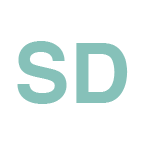
<style>
.page{position:relative;width:144px;height:144px;background:#ffffff}
.page>*{position:absolute;margin:0}
.t1{font:83.3px "Helvetica-Bold";color:#86c1b9}
</style>
<div class="page">
<p class="t1" style="left:17px;top:41px;width:111px;height:63px">SD</p>
</div>
